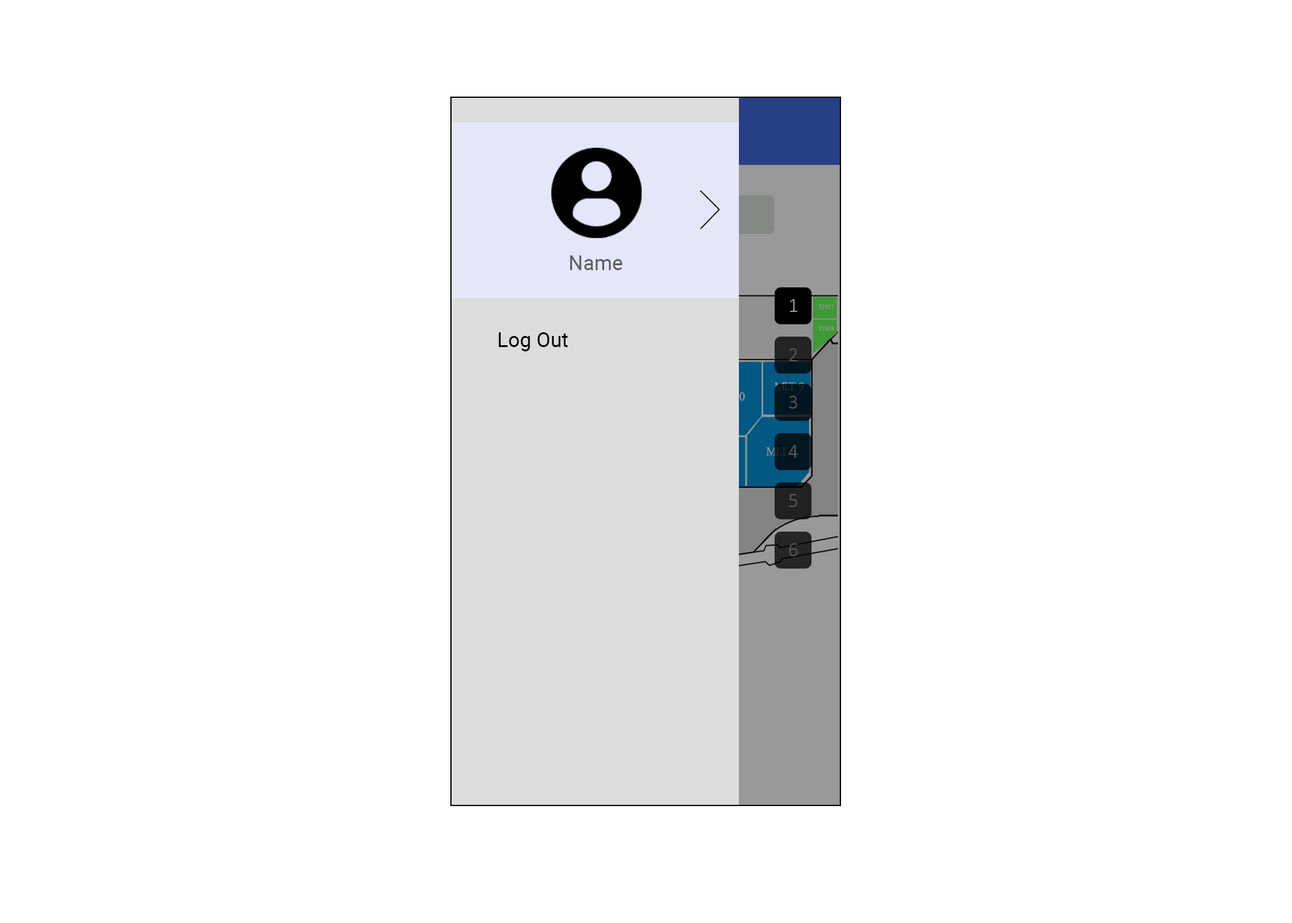
<style>
.page{position:relative;width:1292px;height:923px;background:#ffffff}
.page>*{position:absolute;margin:0}
.t1{font:20.5px "Roboto-Regular";color:#5e5c5c}
.t2{font:20.5px "Calibri-Light";color:#999999}
.t3{font:20.5px "Roboto-Regular";color:#000000}
.t4{font:20.5px "Calibri-Light";color:#5c5757}
</style>
<div class="page">
<p class="t1" style="left:570px;top:255px;width:53px;height:15px">Name</p>
<p class="t2" style="left:790px;top:299px;width:7px;height:13px">1</p>
<p class="t3" style="left:498px;top:332px;width:70px;height:19px">Log Out</p>
<p class="t4" style="left:789px;top:348px;width:8px;height:13px">2</p>
<p class="t4" style="left:789px;top:396px;width:8px;height:13px">3</p>
<p class="t4" style="left:788px;top:445px;width:10px;height:13px">4</p>
<p class="t4" style="left:789px;top:494px;width:8px;height:13px">5</p>
<p class="t4" style="left:789px;top:543px;width:9px;height:13px">6</p>
</div>
